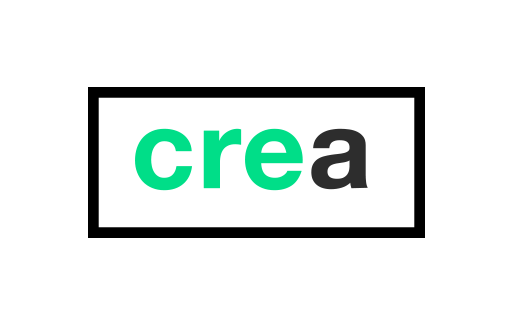
<style>
.page{position:relative;width:522px;height:330px;background:#ffffff}
.page>*{position:absolute;margin:0}
.t1{font:110.8px "HelveticaNeue-Bold";color:#00de88;font-weight:bold}
.t2{font:110.8px "HelveticaNeue-Bold";color:#2d2d2d;font-weight:bold}
</style>
<div class="page">
<p class="t1" style="left:135px;top:128px;width:233px;height:63px">cre<span class="t2">a</span></p>
</div>
